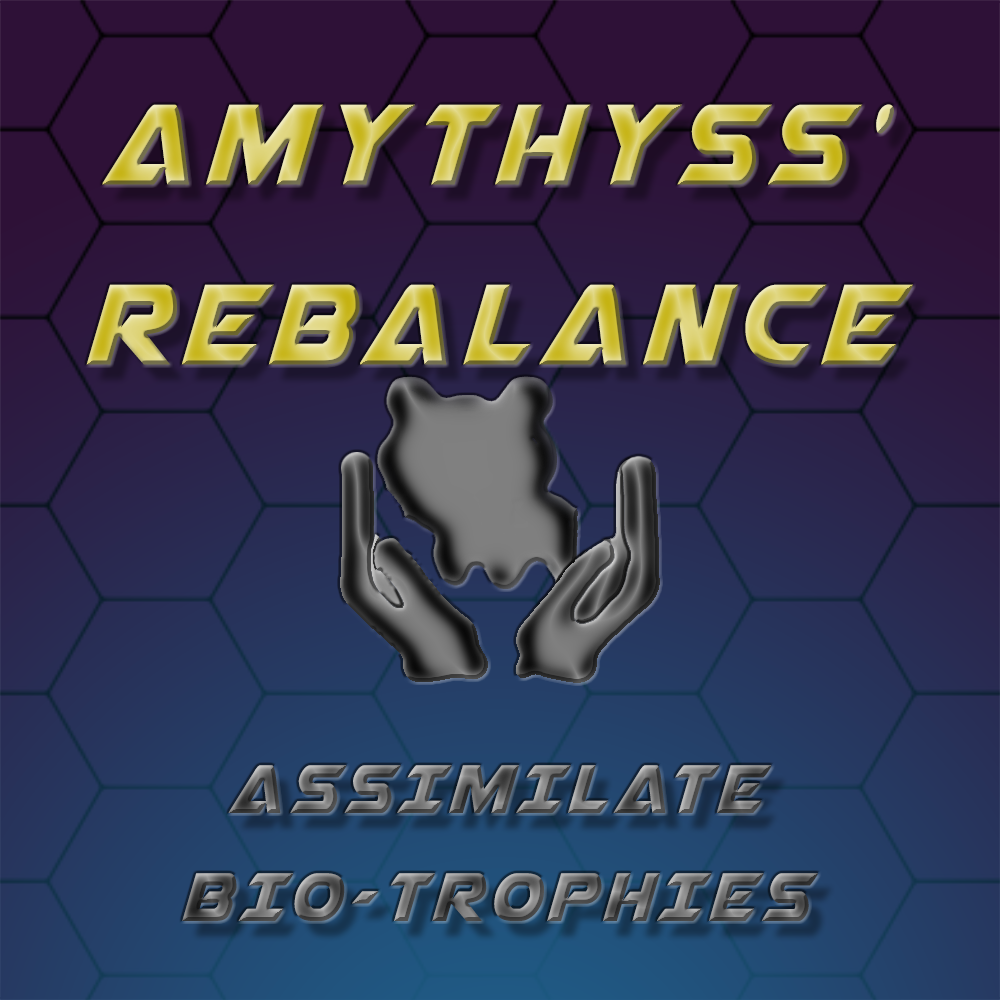
<style>
.page{position:relative;width:1000px;height:1000px}
.page>*{position:absolute;margin:0}
.t1{font:150px "AirstrikeCondensed";letter-spacing:0.08em;text-transform:uppercase}
.t2{font:90px "AirstrikeCondensed";letter-spacing:0.08em;text-transform:uppercase}
</style>
<div class="page">
<p class="t1" style="left:86px;top:104px;width:827px;height:261px;text-align:center">amythyss’<br>Rebalance</p>
<p class="t2" style="left:182px;top:765px;width:637px;height:156px;text-align:center">Assimilate<br>Bio-Trophies</p>
</div>
